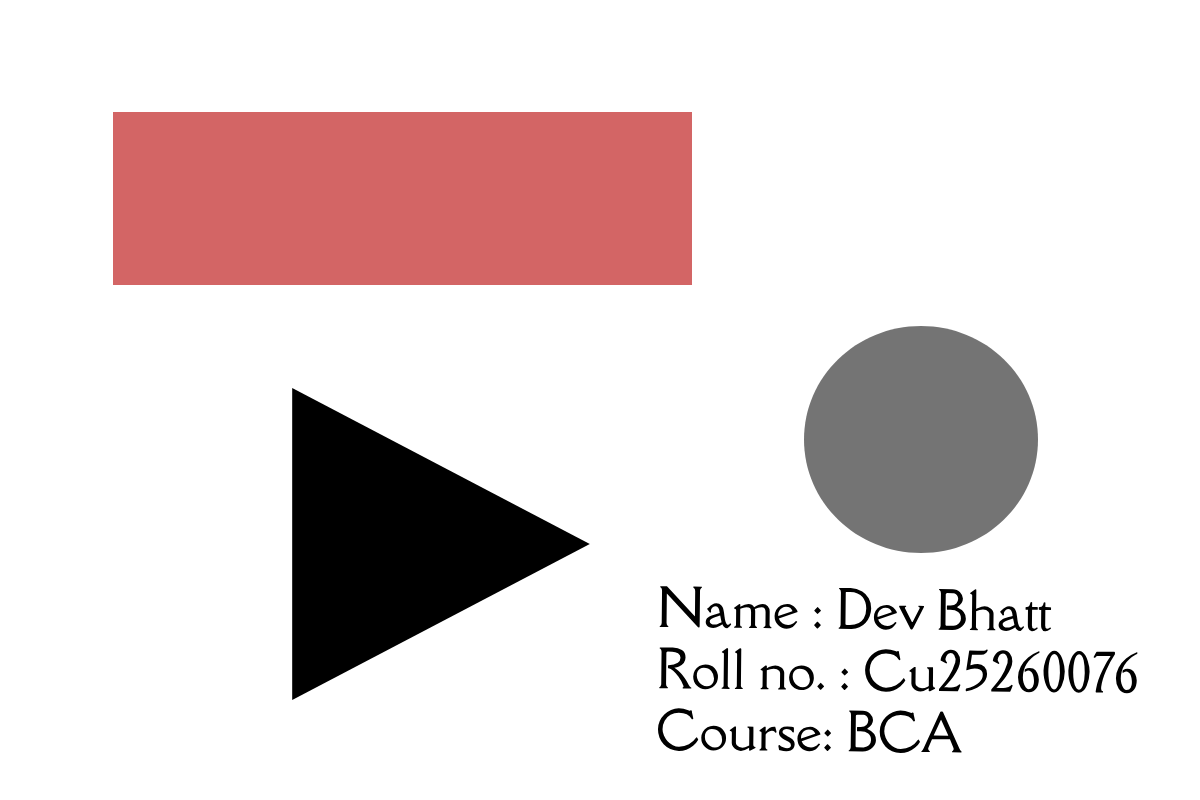
<style>
.page{position:relative;width:1200px;height:800px;background:#ffffff}
.page>*{position:absolute;margin:0}
.t1{font:51px "DellaRespira-Regular";color:#000000}
</style>
<div class="page">
<p class="t1" style="left:657px;top:586px;width:481px;height:168px;rotate:1deg">Name : Dev Bhatt<br>Roll no. : Cu25260076<br>Course: BCA</p>
</div>
